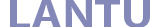
<style>
.page{position:relative;width:160px;height:27px;background:#ffffff}
.page>*{position:absolute;margin:0}
.t1{font:36px "KozGoPr6N-Bold";color:#8488b9;scale:1.31 1}
</style>
<div class="page">
<p class="t1" style="left:10px;top:0px;width:140px;height:28px">LANTU</p>
</div>
